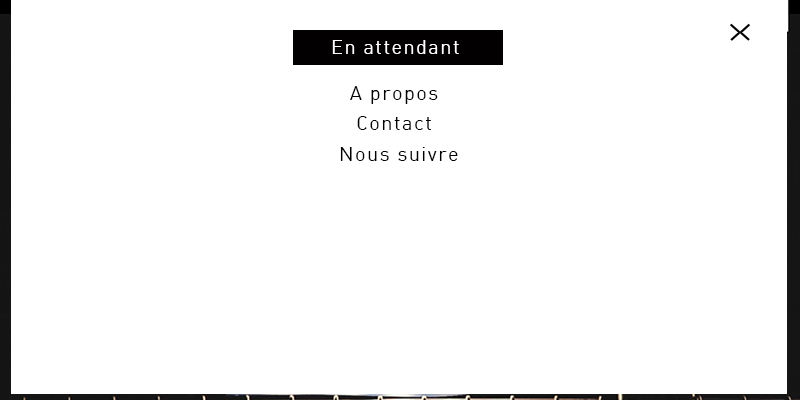
<style>
.page{position:relative;width:800px;height:400px;background:#ffffff}
.page>*{position:absolute;margin:0}
.t1{font:20px "DIN-RegularAlternate";letter-spacing:0.07em;color:#ffffff}
.t2{font:20px/30px "DIN-RegularAlternate";letter-spacing:0.07em;color:#000203}
.t3{font:20px "DIN-RegularAlternate";letter-spacing:0.07em;color:#000000}
</style>
<div class="page">
<p class="t1" style="left:332px;top:40px;width:127px;height:14px">En attendant</p>
<p class="t2" style="left:350px;top:86px;width:88px;height:44px;text-align:center">A propos<br>Contact</p>
<p class="t3" style="left:340px;top:147px;width:118px;height:14px">Nous suivre</p>
</div>
